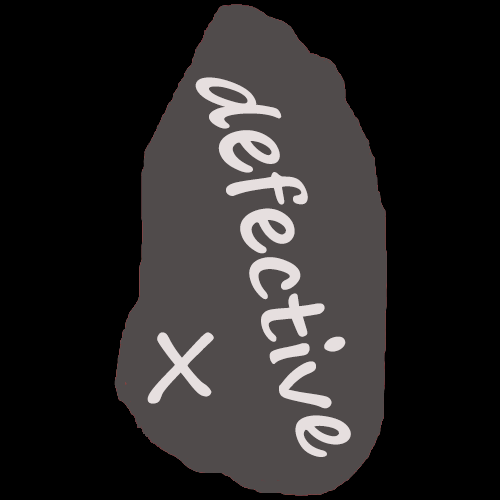
<style>
.page{position:relative;width:500px;height:500px;background:#000000}
.page>*{position:absolute;margin:0}
.t1{font:90px "SegoePrint-Bold";color:#e6dfdf}
</style>
<div class="page">
<p class="t1" style="left:195px;top:77px;width:156px;height:380px;rotate:-18deg">defective</p>
<p class="t1" style="left:147px;top:332px;width:67px;height:72px">X</p>
</div>
